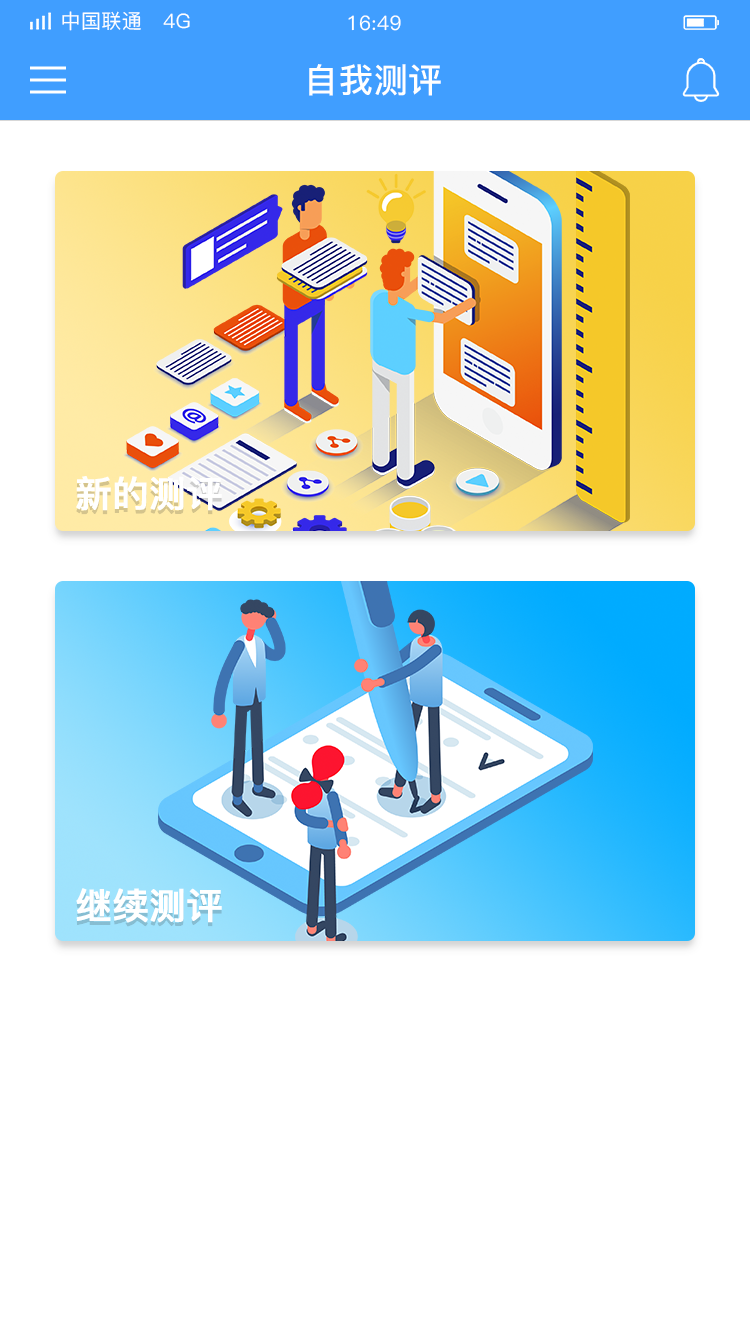
<style>
.page{position:relative;width:750px;height:1334px;background:#ffffff}
.page>*{position:absolute;margin:0}
.t1{font:20px "PingFang-SC-Medium";letter-spacing:0.02em;color:#ffffff}
.t2{font:34px "PingFang-SC-Bold";letter-spacing:0.02em;color:#ffffff}
.t3{font:36px "PingFang-SC-Bold";color:#ffffff;font-weight:bold}
</style>
<div class="page">
<p class="t1" style="left:62px;top:11px;width:128px;height:20px">中国联通   4G</p>
<p class="t1" style="left:348px;top:15px;width:53px;height:16px">16:49</p>
<p class="t2" style="left:309px;top:64px;width:132px;height:32px">自我测评</p>
<p class="t3" style="left:76px;top:476px;width:146px;height:35px">新的测评</p>
<p class="t3" style="left:76px;top:888px;width:146px;height:35px">继续测评</p>
</div>
